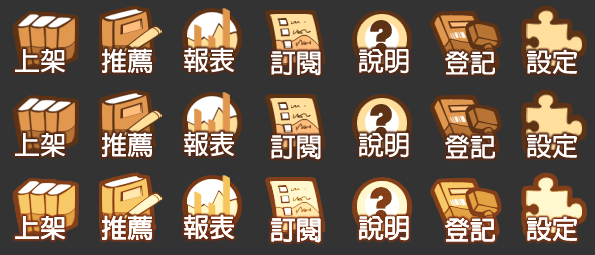
<style>
.page{position:relative;width:595px;height:255px;background:#333333}
.page>*{position:absolute;margin:0}
.t1{font:49px "Bauhaus93";color:#5e3215}
.t2{font:26px "AdobeFanHeitiStd-Bold";color:#ffffff}
</style>
<div class="page">
<p class="t1" style="left:370px;top:20px;width:22px;height:35px">?</p>
<p class="t2" style="left:15px;top:49px;width:50px;height:24px">上架</p>
<p class="t2" style="left:101px;top:48px;width:51px;height:25px">推薦</p>
<p class="t2" style="left:184px;top:47px;width:51px;height:26px">報表</p>
<p class="t2" style="left:271px;top:51px;width:50px;height:25px">訂閱</p>
<p class="t2" style="left:359px;top:49px;width:50px;height:25px">說明</p>
<p class="t2" style="left:445px;top:50px;width:50px;height:25px">登記</p>
<p class="t2" style="left:527px;top:49px;width:50px;height:26px">設定</p>
</div>
